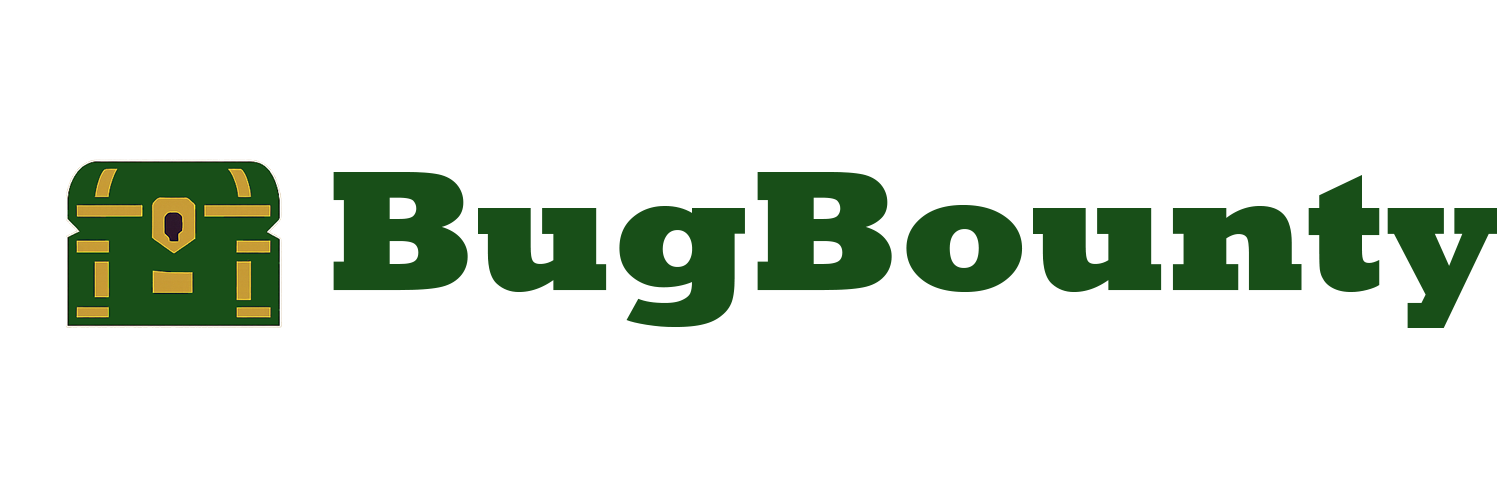
<style>
.page{position:relative;width:1500px;height:500px;background:#ffffff}
.page>*{position:absolute;margin:0}
.t1{font:174px "Rockwell-ExtraBold";color:#184f18}
</style>
<div class="page">
<p class="t1" style="left:333px;top:172px;width:1164px;height:156px">BugBounty</p>
</div>
